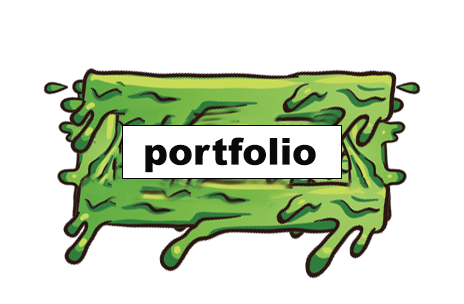
<style>
.page{position:relative;width:464px;height:304px;background:#ffffff}
.page>*{position:absolute;margin:0}
.t1{font:37.5px "Arial-Black";color:#0a0909}
</style>
<div class="page">
<p class="t1" style="left:145px;top:137px;width:171px;height:36px">portfolio</p>
</div>
